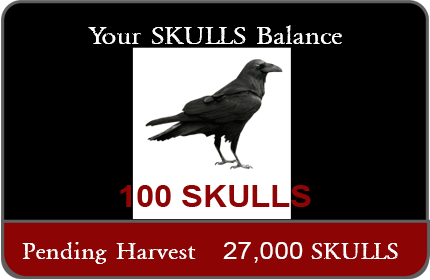
<style>
.page{position:relative;width:430px;height:280px;background:#000000}
.page>*{position:absolute;margin:0}
.t1{font:26.4px "NIGHTMAREPILLS";color:#ffffff;scale:1.09 1}
.t2{font:30px "Arial-BoldMT";color:#8f0404;scale:1.09 1}
.t3{font:24.3px "NIGHTMAREPILLS";color:#ffffff;scale:1.09 1}
.t4{font:24.3px "ArialMT";color:#ffffff;scale:1.09 1}
</style>
<div class="page">
<p class="t1" style="left:88px;top:25px;width:254px;height:19px">Your SKULLS Balance</p>
<p class="t2" style="left:120px;top:185px;width:191px;height:22px">100 SKULLS</p>
<p class="t3" style="left:22px;top:242px;width:376px;height:22px">Pending Harvest   <span class="t4">27,000 </span>SKULLS</p>
</div>
